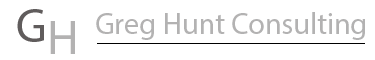
<style>
.page{position:relative;width:375px;height:60px;background:#ffffff}
.page>*{position:absolute;margin:0}
.t1{font:48px "MyriadPro-Regular";color:#605c5c}
.t2{font:30px "MyriadPro-Regular";color:#b3b2b2}
.t3{font:48px "MyriadPro-Regular";color:#b3b2b2}
</style>
<div class="page">
<p class="t1" style="left:17px;top:9px;width:27px;height:33px">G</p>
<p class="t2" style="left:96px;top:12px;width:269px;height:28px">Greg Hunt Consulting</p>
<p class="t3" style="left:50px;top:21px;width:25px;height:33px">H</p>
</div>
